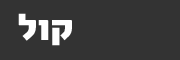
<style>
.page{position:relative;width:180px;height:60px;background:#333333}
.page>*{position:absolute;margin:0}
.t1{font:41.4px "FbAlbatros-Black";color:#ffffff}
</style>
<div class="page">
<p class="t1" style="left:18px;top:13px;width:54px;height:33px">קול</p>
</div>
